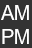
<style>
.page{position:relative;width:32px;height:48px;background:#333333}
.page>*{position:absolute;margin:0}
.t1{font:19.7px "ArialMT";color:#ffffff}
</style>
<div class="page">
<p class="t1" style="left:1px;top:5px;width:28px;height:15px">AM</p>
<p class="t1" style="left:2px;top:29px;width:27px;height:15px">PM</p>
</div>
